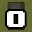
<style>
.page{position:relative;width:32px;height:32px}
.page>*{position:absolute;margin:0}
.t1{font:32.4px "UpheavalTT-BRK-";letter-spacing:0.04em;color:#ffffff}
</style>
<div class="page">
<p class="t1" style="left:7px;top:11px;width:18px;height:16px">0</p>
</div>
